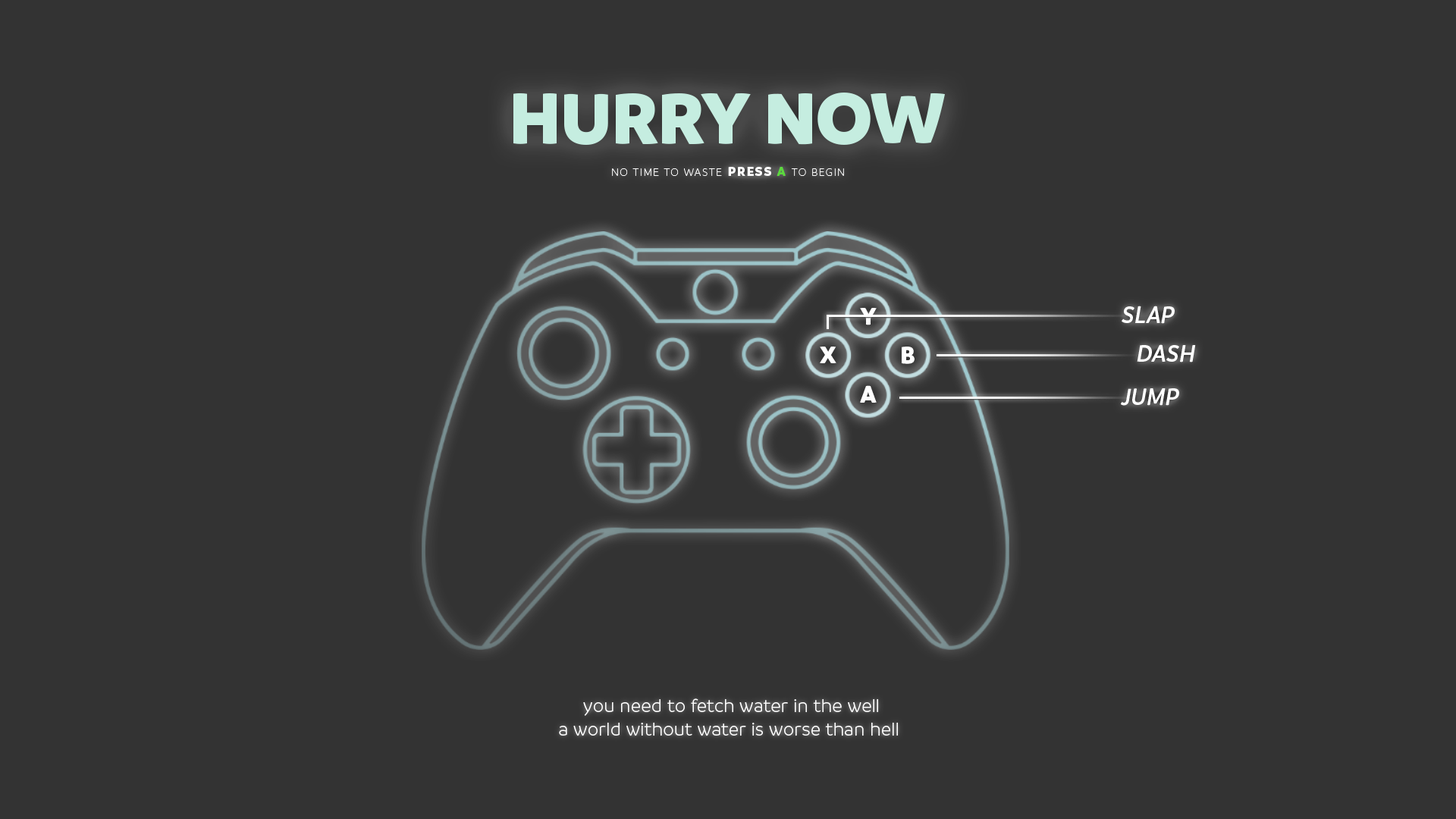
<style>
.page{position:relative;width:1456px;height:819px;background:#333333}
.page>*{position:absolute;margin:0}
.t1{font:76.2px "Branding-Black";color:#c5ede0;text-transform:uppercase}
.t2{font:11.4px "Branding-Light";letter-spacing:0.08em;color:#ffffff;text-transform:uppercase}
.t3{font:13.3px "Branding-Black";letter-spacing:0.1em;color:#ffffff;text-transform:uppercase}
.t4{font:13.3px "Branding-Black";letter-spacing:0.1em;color:#5bd93d;text-transform:uppercase}
.t5{font:24.7px "Branding-SemiboldItalic";color:#ffffff;text-transform:uppercase}
.t6{font:25px "Branding-Black";color:#ffffff;text-transform:uppercase}
.t7{font:19.8px "Branding-Semilight";color:#ffffff}
.t8{font:41px "Branding-Black";color:#ffffff;text-transform:uppercase}
</style>
<div class="page">
<p class="t1" style="left:513px;top:93px;width:432px;height:52px">Hurry now</p>
<p class="t2" style="left:612px;top:167px;width:232px;height:9px">no time to waste <span class="t3">press </span><span class="t4">a </span>to begin</p>
<p class="t5" style="left:1122px;top:306px;width:53px;height:18px">slap</p>
<p class="t6" style="left:860px;top:308px;width:17px;height:17px">y</p>
<p class="t6" style="left:820px;top:347px;width:16px;height:16px">x</p>
<p class="t6" style="left:902px;top:347px;width:13px;height:17px">b</p>
<p class="t5" style="left:1137px;top:344px;width:59px;height:18px">DASH</p>
<p class="t6" style="left:860px;top:385px;width:17px;height:18px">a</p>
<p class="t5" style="left:1121px;top:388px;width:58px;height:18px">jump</p>
<p class="t7" style="left:559px;top:698px;width:339px;height:38px;text-align:center"><span class="t8"><br></span>you need to fetch water in the well<br>a world without water is worse than hell</p>
</div>
